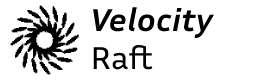
<style>
.page{position:relative;width:280px;height:80px;background:#ffffff}
.page>*{position:absolute;margin:0}
.t1{font:32px "InriaSans-BoldItalic";color:#000000;scale:1.1 1}
.t2{font:32px "InriaSans-Regular";color:#000000;scale:1.1 1}
</style>
<div class="page">
<p class="t1" style="left:93px;top:7px;width:121px;height:63px">Velocity<br><span class="t2">Raft</span></p>
</div>
